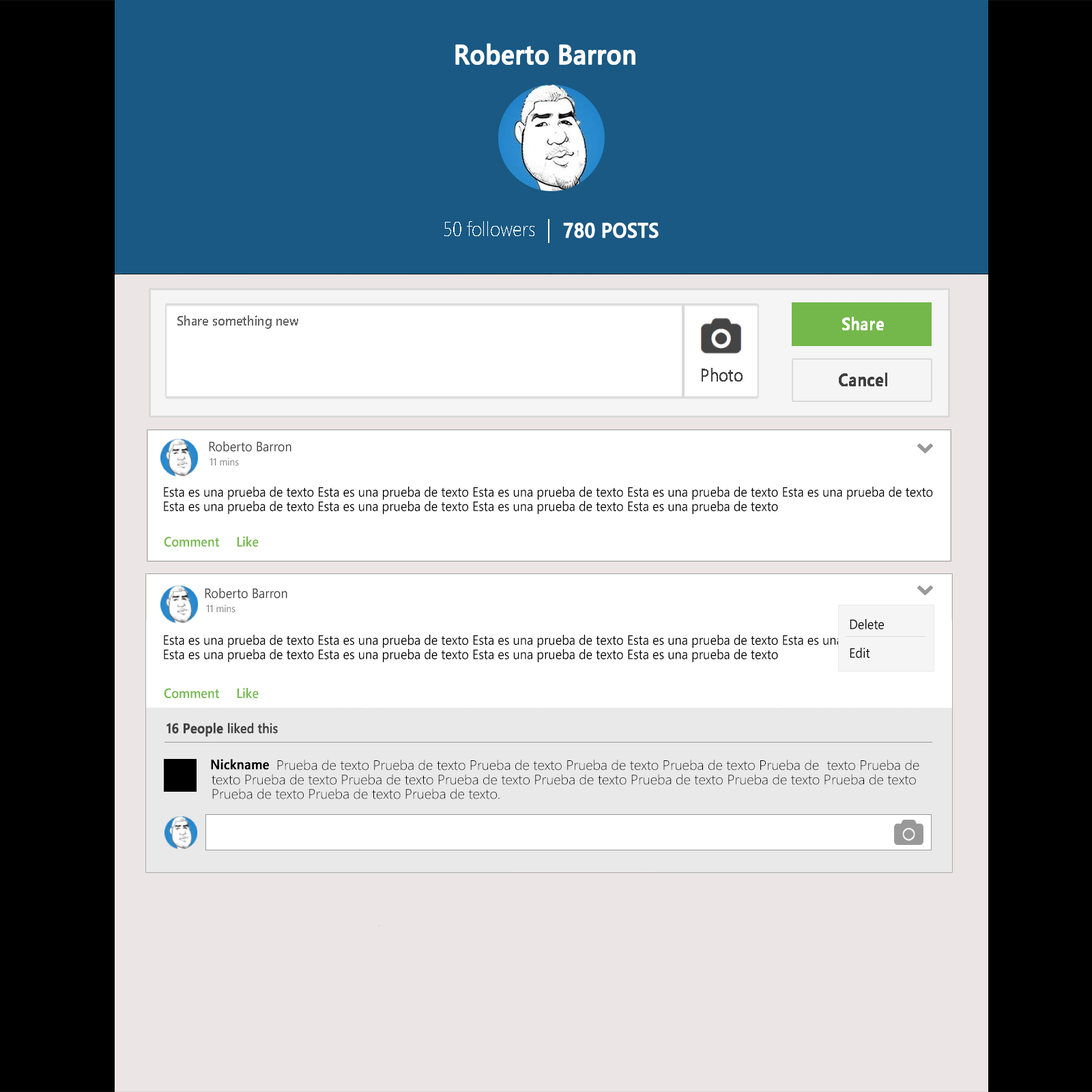
<style>
.page{position:relative;width:1092px;height:1092px;background:#ffffff}
.page>*{position:absolute;margin:0}
.t1{font:27.3px "SegoeWP-Semibold";color:#ffffff;font-weight:bold;scale:0.91 1}
.t2{font:20.5px "SegoeWP-Light";color:#ffffff;scale:0.91 1}
.t3{font:20.5px "SegoeWP-Semibold";color:#ffffff;font-weight:bold;scale:0.91 1}
.t4{font:13.6px "SegoeWP-Semibold";color:#666666;scale:0.91 1}
.t5{font:17.1px "SegoeWP-Semibold";color:#ffffff;font-weight:bold;scale:0.91 1}
.t6{font:17.1px "SegoeWP-Light";color:#404040;font-weight:bold;scale:0.91 1}
.t7{font:17.1px "SegoeWP-Semibold";color:#404040;font-weight:bold;scale:0.91 1}
.t8{font:13.6px "SegoeWP";color:#404040;scale:0.91 1}
.t9{font:10.2px "SegoeWP";color:#808080;scale:0.91 1}
.t10{font:13.6px/7.2px "SegoeWP";color:#000000;scale:0.91 1}
.t11{font:13.6px "SegoeWP-Semibold";color:#74b84b;scale:0.91 1}
.t12{font:13.6px "SegoeWP-Semibold";color:#404040;scale:0.91 1}
.t13{font:13.6px "SegoeWP-Semibold";color:#404040;font-weight:bold;scale:0.91 1}
.t14{font:13.6px "SegoeWP-Semibold";color:#000000;font-weight:bold;scale:0.91 1}
.t15{font:13.7px/7.2px "SegoeWP-Light";color:#000000}
</style>
<div class="page">
<p class="t1" style="left:455px;top:43px;width:180px;height:22px">Roberto Barron</p>
<p class="t2" style="left:444px;top:221px;width:90px;height:15px">50 followers</p>
<p class="t3" style="left:563px;top:222px;width:96px;height:16px">780 POSTS</p>
<p class="t4" style="left:177px;top:315px;width:121px;height:14px">Share something new</p>
<p class="t5" style="left:842px;top:317px;width:42px;height:13px">Share</p>
<p class="t6" style="left:702px;top:368px;width:41px;height:14px">Photo</p>
<p class="t7" style="left:839px;top:373px;width:48px;height:13px">Cancel</p>
<p class="t8" style="left:209px;top:441px;width:82px;height:11px">Roberto Barron</p>
<p class="t9" style="left:210px;top:458px;width:29px;height:8px">11 mins</p>
<p class="t10" style="left:164px;top:487px;width:769px;height:28px">Esta es una prueba de texto Esta es una prueba de texto Esta es una prueba de texto Esta es una prueba de texto Esta es una prueba de texto<br><br>Esta es una prueba de texto Esta es una prueba de texto Esta es una prueba de texto Esta es una prueba de texto</p>
<p class="t11" style="left:164px;top:536px;width:95px;height:11px">Comment     Like</p>
<p class="t8" style="left:205px;top:588px;width:82px;height:11px">Roberto Barron</p>
<p class="t9" style="left:206px;top:605px;width:29px;height:8px">11 mins</p>
<p class="t10" style="left:850px;top:619px;width:34px;height:39px">Delete<br><br><br><br>Edit</p>
<p class="t10" style="left:164px;top:635px;width:769px;height:28px">Esta es una prueba de texto Esta es una prueba de texto Esta es una prueba de texto Esta es una prueba de texto Esta es una prueba de texto<br><br>Esta es una prueba de texto Esta es una prueba de texto Esta es una prueba de texto Esta es una prueba de texto</p>
<p class="t11" style="left:164px;top:688px;width:95px;height:10px">Comment     Like</p>
<p class="t12" style="left:167px;top:723px;width:111px;height:14px"><span class="t13">16 People </span>liked this</p>
<p class="t14" style="left:211px;top:759px;width:58px;height:11px">Nickname</p>
<p class="t15" style="left:212px;top:760px;width:707px;height:39px">Prueba de texto Prueba de texto Prueba de texto Prueba de texto Prueba de texto Prueba de  texto Prueba de <br><br>texto Prueba de texto Prueba de texto Prueba de texto Prueba de texto Prueba de texto Prueba de texto Prueba de texto<br><br>Prueba de texto Prueba de texto Prueba de texto.</p>
</div>
